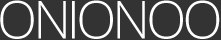
<style>
.page{position:relative;width:221px;height:40px;background:#333333}
.page>*{position:absolute;margin:0}
.t1{font:52.6px "OpenSans-Light";letter-spacing:-0.07em;color:#ffffff}
</style>
<div class="page">
<p class="t1" style="left:0px;top:0px;width:220px;height:39px">ONIONOO</p>
</div>
